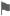
<style>
.page{position:relative;width:10px;height:16px;background:#ffffff}
.page>*{position:absolute;margin:0}
.t1{font:18px "DejaVuSansCondensed";color:#595a5a}
</style>
<div class="page">
<p class="t1" style="left:0px;top:1px;width:10px;height:14px">⚑</p>
</div>
